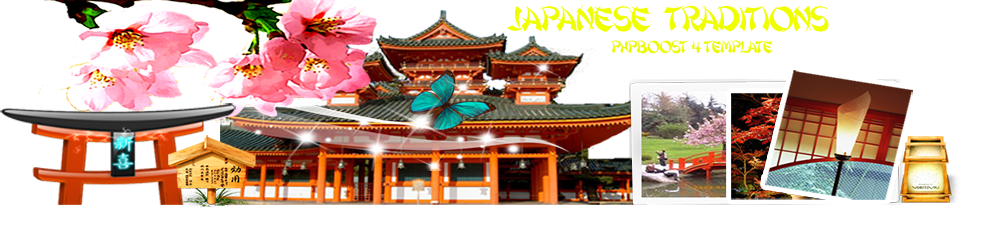
<style>
.page{position:relative;width:1000px;height:233px;background:#ffffff}
.page>*{position:absolute;margin:0}
.t1{font:36px "Shanghai";letter-spacing:-0.05em;color:#f0ff00;text-transform:uppercase}
.t2{font:18px "Shanghai";letter-spacing:-0.05em;color:#ebf906;text-transform:uppercase}
</style>
<div class="page">
<p class="t1" style="left:506px;top:5px;width:323px;height:28px">Japanese   traditions</p>
<p class="t2" style="left:611px;top:40px;width:162px;height:14px">pHPbOOST 4 tEMPLATE</p>
</div>
